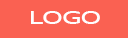
<style>
.page{position:relative;width:128px;height:38px;background:#fa6152}
.page>*{position:absolute;margin:0}
.t1{font:17.9px "Tahoma";color:#fefefe;scale:1.56 1}
</style>
<div class="page">
<p class="t1" style="left:31px;top:11px;width:69px;height:13px">LOGO</p>
</div>
